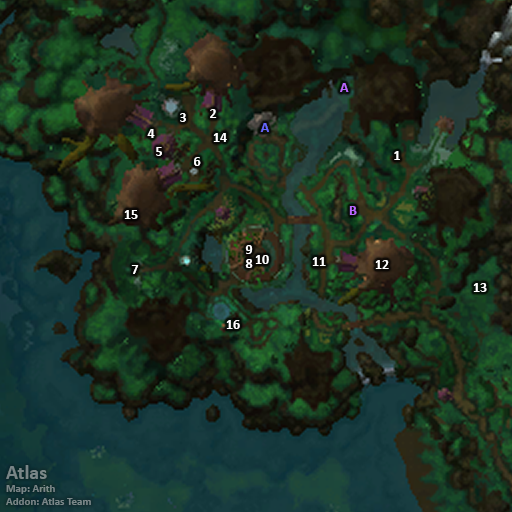
<style>
.page{position:relative;width:512px;height:512px}
.page>*{position:absolute;margin:0}
.t1{font:14px "Calibri-Bold";color:#bb66ff}
.t2{font:14px "Calibri-Bold";color:#ffffff}
.t3{font:14px "Calibri-Bold";color:#6666ff}
.t4{font:11px "Calibri-Bold";color:#798587}
.t5{font:20px "Calibri-Bold";color:#798587}
</style>
<div class="page">
<p class="t1" style="left:340px;top:83px;width:9px;height:9px">A</p>
<p class="t2" style="left:180px;top:113px;width:6px;height:9px">3</p>
<p class="t2" style="left:210px;top:109px;width:7px;height:9px">2</p>
<p class="t3" style="left:260px;top:123px;width:9px;height:9px">A</p>
<p class="t2" style="left:147px;top:129px;width:8px;height:9px">4</p>
<p class="t2" style="left:213px;top:133px;width:14px;height:9px">14</p>
<p class="t2" style="left:156px;top:147px;width:6px;height:9px">5</p>
<p class="t2" style="left:194px;top:157px;width:7px;height:9px">6</p>
<p class="t2" style="left:394px;top:151px;width:6px;height:9px">1</p>
<p class="t1" style="left:349px;top:206px;width:8px;height:9px">B</p>
<p class="t2" style="left:124px;top:210px;width:14px;height:9px">15</p>
<p class="t2" style="left:245px;top:245px;width:8px;height:9px">9</p>
<p class="t2" style="left:255px;top:255px;width:14px;height:9px">10</p>
<p class="t2" style="left:312px;top:257px;width:14px;height:9px">11</p>
<p class="t2" style="left:131px;top:265px;width:8px;height:9px">7</p>
<p class="t2" style="left:245px;top:259px;width:8px;height:9px">8</p>
<p class="t2" style="left:375px;top:260px;width:14px;height:9px">12</p>
<p class="t2" style="left:473px;top:283px;width:14px;height:9px">13</p>
<p class="t2" style="left:226px;top:320px;width:14px;height:9px">16</p>
<p class="t4" style="left:6px;top:465px;width:85px;height:40px"><span class="t5">Atlas<br></span>Map: Arith<br>Addon: Atlas Team</p>
</div>
